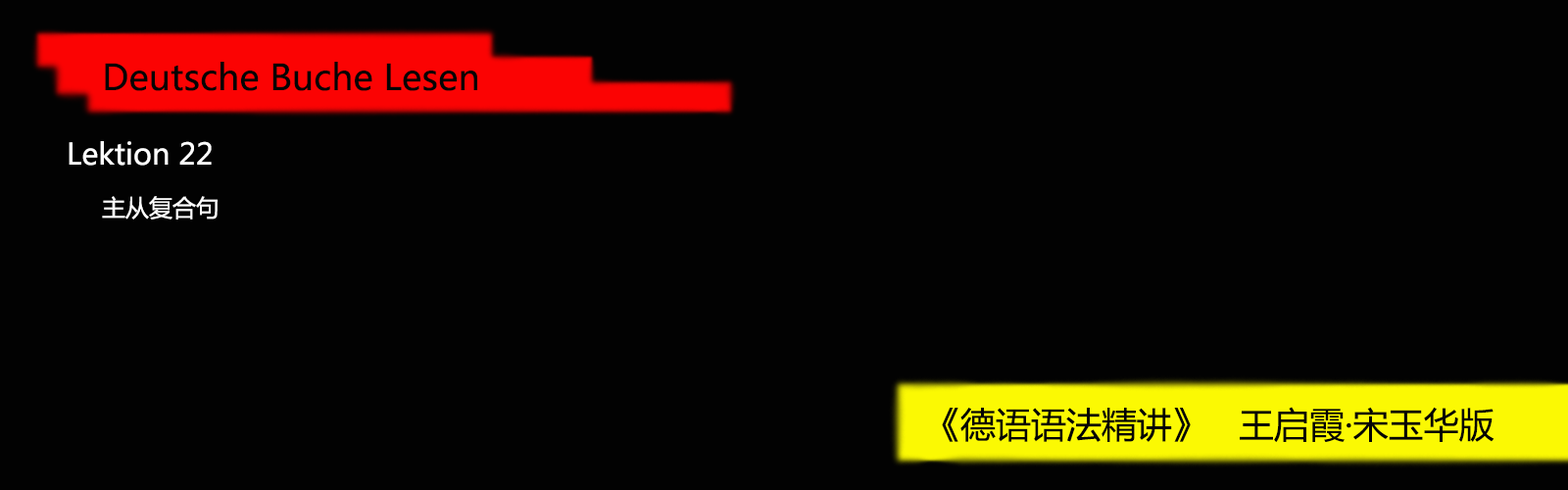
<style>
.page{position:relative;width:1568px;height:490px;background:#020202}
.page>*{position:absolute;margin:0}
.t1{font:35.3px "MicrosoftYaHei";color:#040404}
.t2{font:29.4px "MicrosoftYaHei";color:#fefefe}
.t3{font:23.5px "MicrosoftYaHei";color:#fefefe}
</style>
<div class="page">
<p class="t1" style="left:105px;top:62px;width:372px;height:29px">Deutsche Buche Lesen</p>
<p class="t2" style="left:69px;top:141px;width:149px;height:79px">Lektion 22<br> <span class="t3">主从复合句</span></p>
<p class="t1" style="left:942px;top:407px;width:552px;height:35px">《德语语法精讲》   王启霞·宋玉华版</p>
</div>
